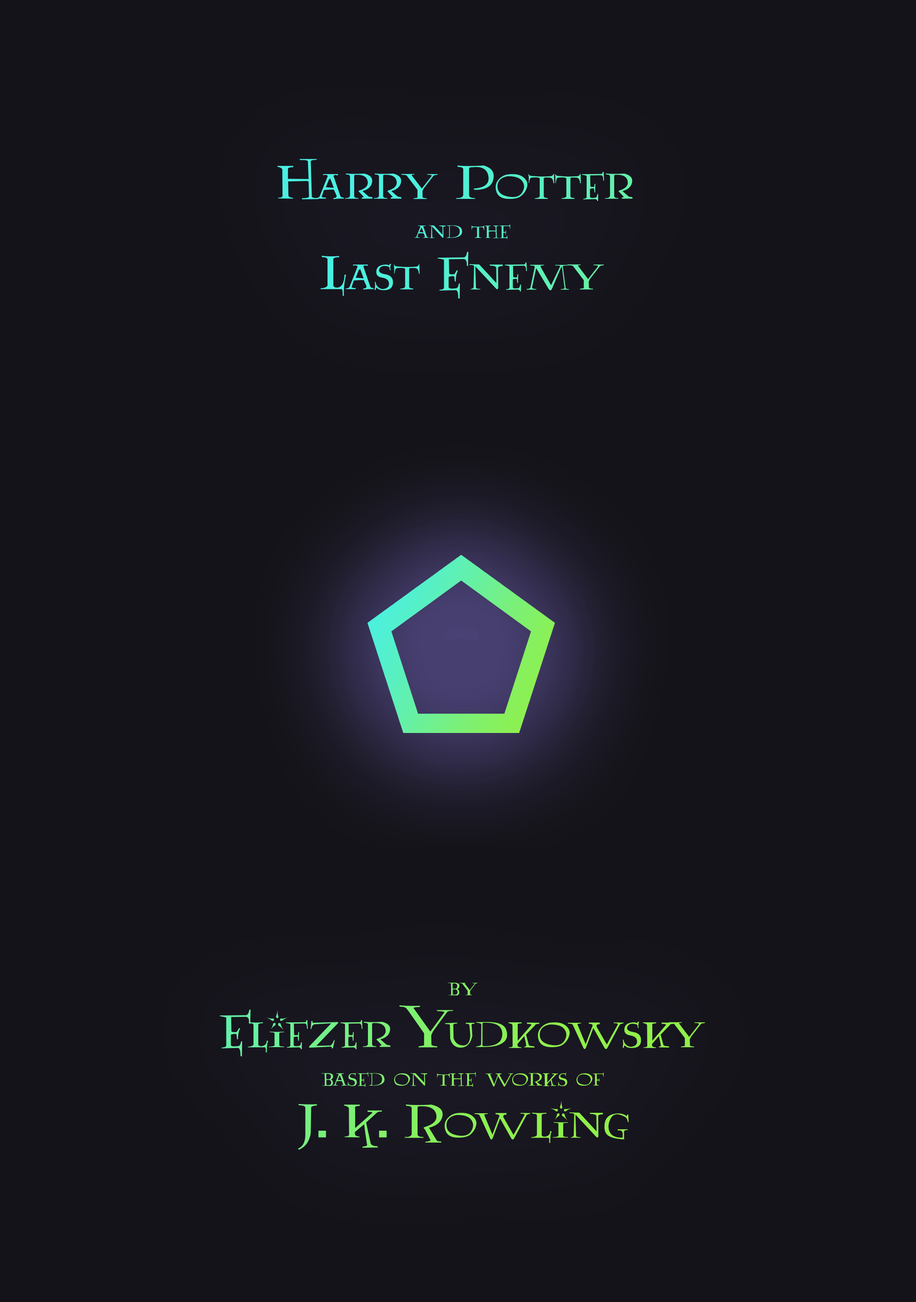
<style>
.page{position:relative;width:916px;height:1302px;background:#141319}
.page>*{position:absolute;margin:0}
.t1{font:55.1px/51.5px "Lumos";color:#50f0d4}
.t2{font:27.6px/38.9px "Lumos";color:#50f0d4}
.t3{font:27.6px/38.9px "Lumos"}
.t4{font:27.6px/706.4px "Lumos"}
.t5{font:55.1px/51.5px "Lumos"}
</style>
<div class="page">
<p class="t1" style="left:277px;top:159px;width:355px;height:140px;text-align:center">Harry Potter <br><span class="t2">and the<br></span>Last Enemy</p>
<p class="t3" style="left:220px;top:982px;width:485px;height:168px;text-align:center"><span class="t4">by<br></span><span class="t5">Eliezer Yudkowsky<br></span>based on the works of<br><span class="t5">J. K. Rowling</span></p>
</div>
